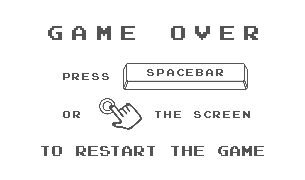
<style>
.page{position:relative;width:305px;height:180px;background:#ffffff}
.page>*{position:absolute;margin:0}
.t1{font:20px "JoystixMonospace-Regular";letter-spacing:0.38em;color:#535353}
.t2{font:10px "JoystixMonospace-Regular";letter-spacing:0.18em;color:#535353}
.t3{font:14px "JoystixMonospace-Regular";color:#535353}
</style>
<div class="page">
<p class="t1" style="left:48px;top:26px;width:210px;height:14px">GAME OVER</p>
<p class="t2" style="left:63px;top:73px;width:46px;height:7px">PRESS</p>
<p class="t2" style="left:147px;top:69px;width:76px;height:7px">SPACEBAR</p>
<p class="t2" style="left:63px;top:111px;width:187px;height:7px">OR     THE SCREEN</p>
<p class="t3" style="left:41px;top:146px;width:223px;height:10px">TO RESTART THE GAME</p>
</div>
